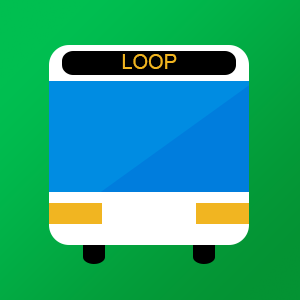
<style>
.page{position:relative;width:300px;height:300px}
.page>*{position:absolute;margin:0}
.t1{font:20px "ArialMT";color:#f1b521}
</style>
<div class="page">
<p class="t1" style="left:122px;top:54px;width:55px;height:15px">LOOP</p>
</div>
